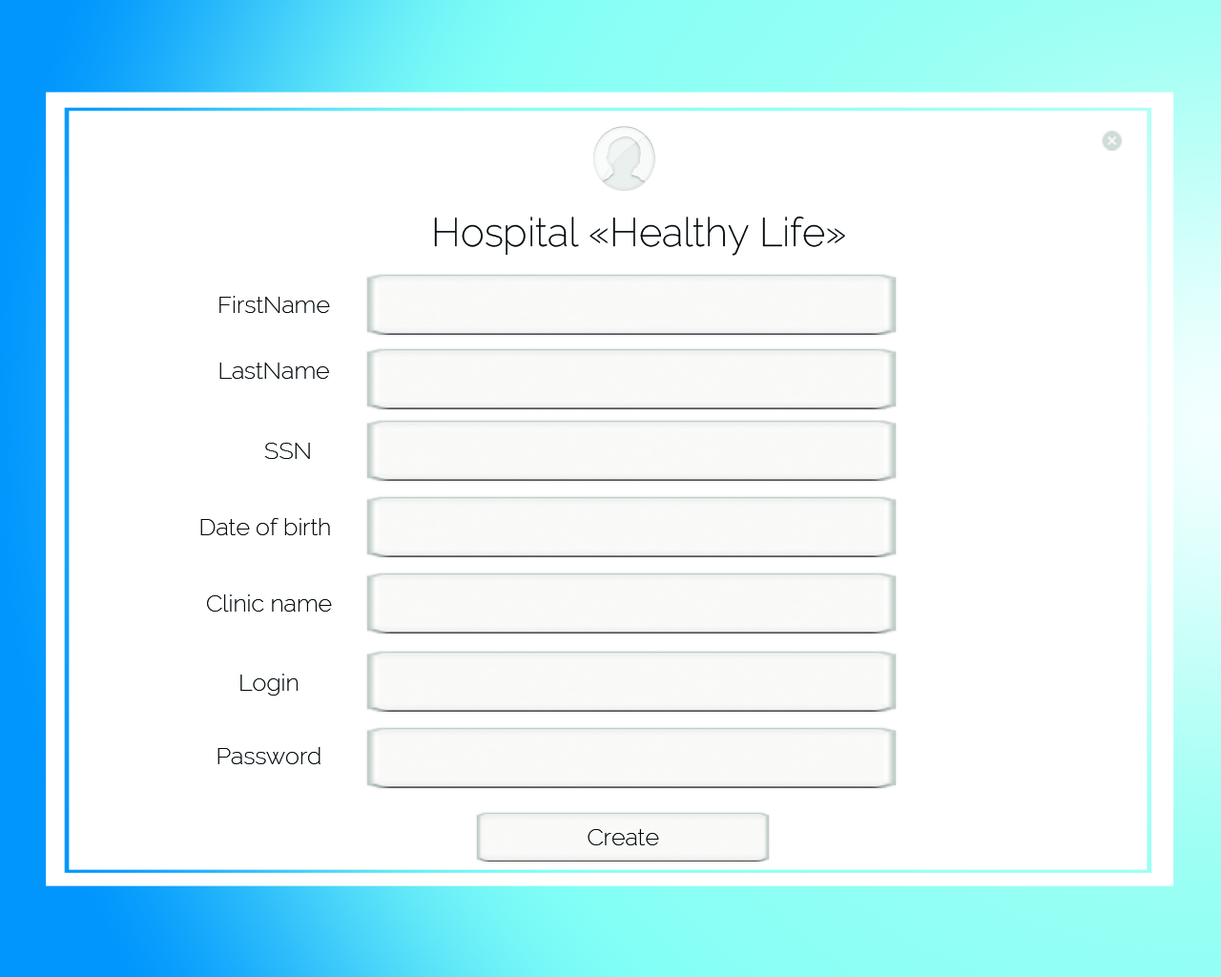
<style>
.page{position:relative;width:1221px;height:977px;background:#ffffff}
.page>*{position:absolute;margin:0}
.t1{font:39.7px "Raleway-ExtraLight";color:#050708}
.t2{font:23.8px "Raleway-ExtraLight";color:#050708}
</style>
<div class="page">
<p class="t1" style="left:434px;top:216px;width:411px;height:40px">Hospital «Healthy Life»</p>
<p class="t2" style="left:219px;top:296px;width:111px;height:17px">FirstName</p>
<p class="t2" style="left:219px;top:362px;width:110px;height:17px">LastName</p>
<p class="t2" style="left:264px;top:443px;width:46px;height:16px">SSN</p>
<p class="t2" style="left:200px;top:518px;width:130px;height:17px">Date of birth</p>
<p class="t2" style="left:207px;top:594px;width:125px;height:17px">Clinic name</p>
<p class="t2" style="left:240px;top:673px;width:58px;height:22px">Login</p>
<p class="t2" style="left:217px;top:747px;width:103px;height:17px">Password</p>
<p class="t2" style="left:588px;top:829px;width:71px;height:16px">Create</p>
</div>
